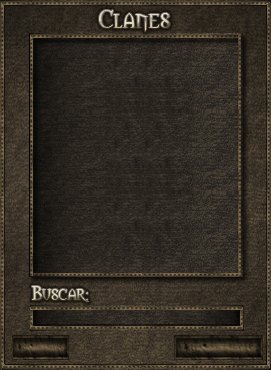
<style>
.page{position:relative;width:271px;height:370px}
.page>*{position:absolute;margin:0}
.t1{font:24px "Morpheus"}
.t2{font:18px "Morpheus"}
</style>
<div class="page">
<p class="t1" style="left:99px;top:10px;width:71px;height:22px">Clanes</p>
<p class="t2" style="left:32px;top:286px;width:57px;height:16px">Buscar:</p>
</div>
